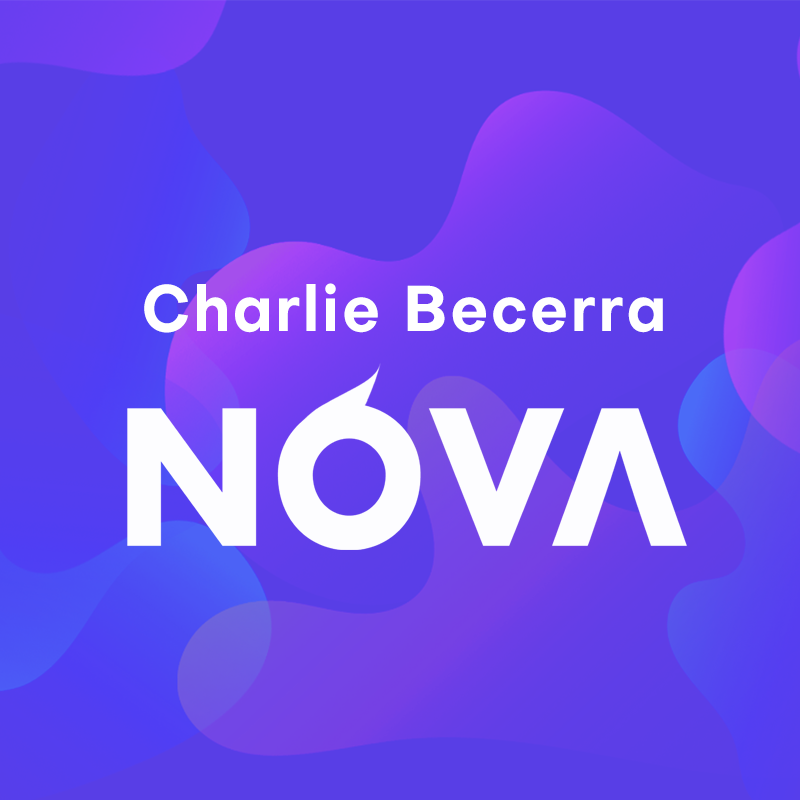
<style>
.page{position:relative;width:800px;height:800px;background:#583ee6}
.page>*{position:absolute;margin:0}
.t1{font:63.4px "Objectivity-Bold";letter-spacing:0.038em;color:#ffffff;scale:0.94 1}
</style>
<div class="page">
<p class="t1" style="left:144px;top:283px;width:519px;height:50px">Charlie Becerra</p>
</div>
